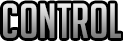
<style>
.page{position:relative;width:123px;height:41px;background:#000000}
.page>*{position:absolute;margin:0}
.t1{font:48px "BigNoodleTitling"}
</style>
<div class="page">
<p class="t1" style="left:3px;top:3px;width:118px;height:35px">Control</p>
</div>
